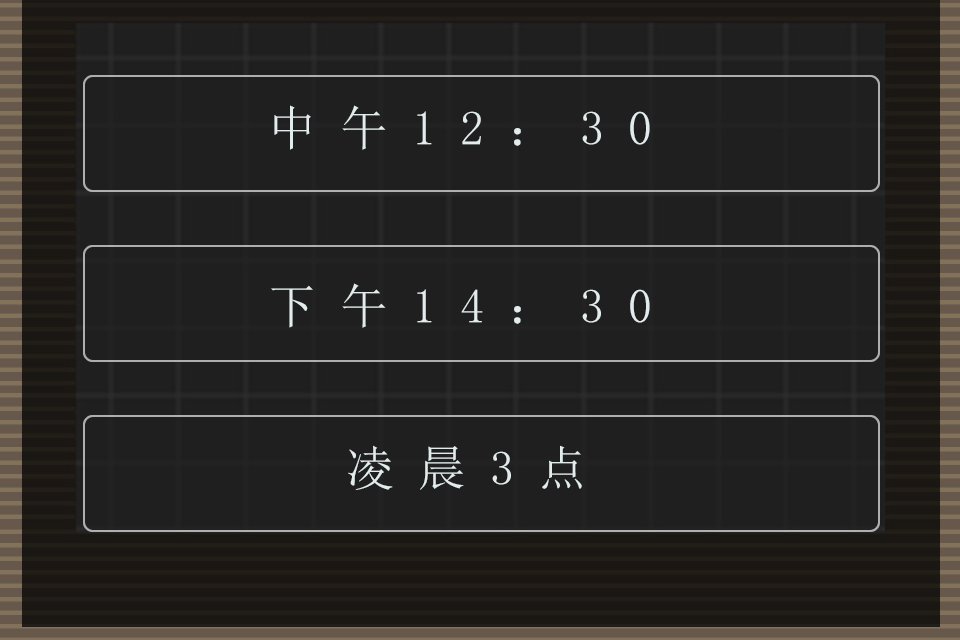
<style>
.page{position:relative;width:960px;height:640px;background:#1f1f1f}
.page>*{position:absolute;margin:0}
.t1{font:48px "SimSun";letter-spacing:0.5em;color:#e3ecec}
</style>
<div class="page">
<p class="t1" style="left:274px;top:105px;width:376px;height:45px">中午12：30</p>
<p class="t1" style="left:271px;top:283px;width:379px;height:45px">下午14：30</p>
<p class="t1" style="left:348px;top:445px;width:234px;height:45px">凌晨3点</p>
</div>
